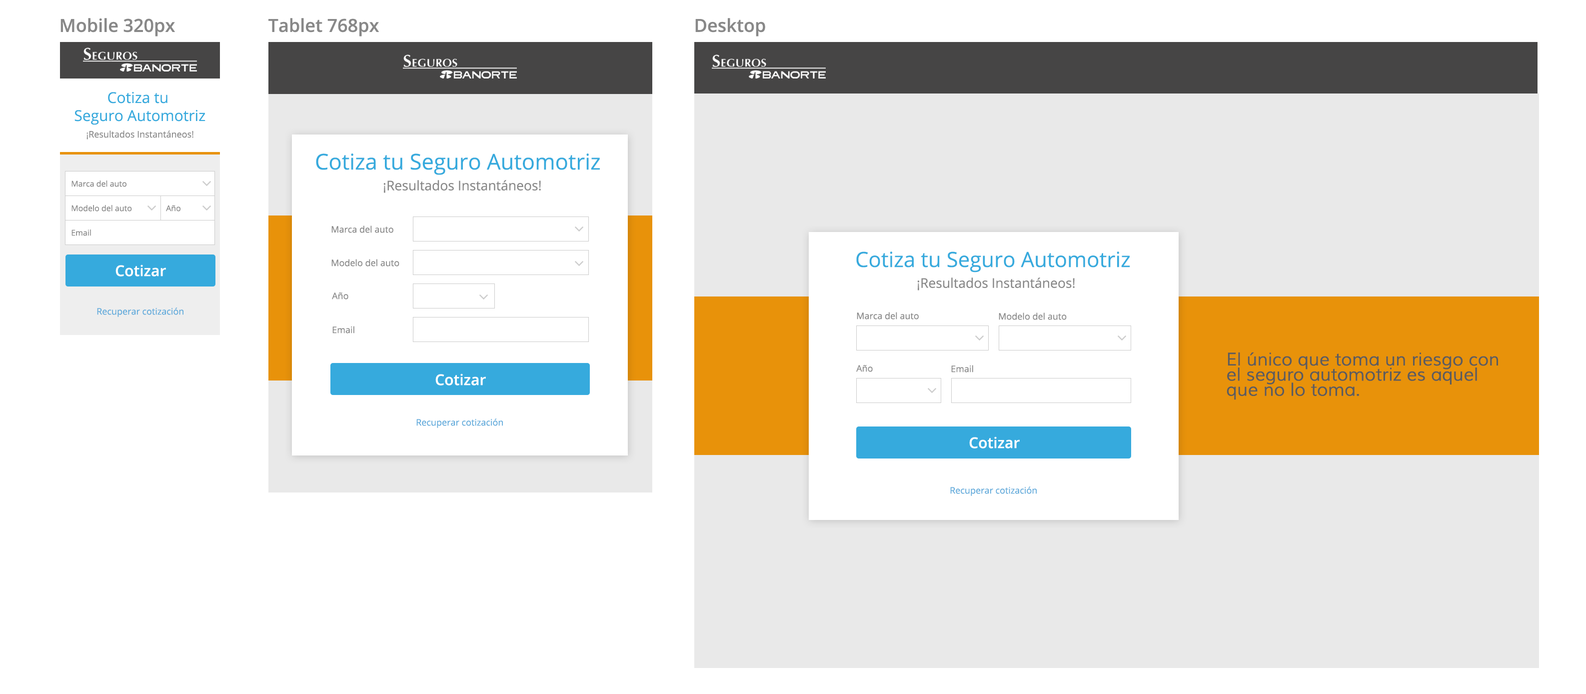
<style>
.page{position:relative;width:1586px;height:694px;background:#ffffff}
.page>*{position:absolute;margin:0}
.t1{font:18px "OpenSans-Semibold";color:#888888}
.t2{font:15px "OpenSans";color:#36aadd}
.t3{font:9px "OpenSans";color:#888888}
.t4{font:21.8px "OpenSans";color:#36aadd}
.t5{font:8px "OpenSans";color:#888888}
.t6{font:13.3px "OpenSans";color:#888888}
.t7{font:21px "OpenSans";color:#36aadd}
.t8{font:15px "OpenSans-Semibold";color:#ffffff}
.t9{font:9px "OpenSans";color:#5faadb}
.t10{font:18px/15.1px "Muli";color:#5c5c5c}
</style>
<div class="page">
<p class="t1" style="left:60px;top:18px;width:115px;height:18px">Mobile 320px</p>
<p class="t1" style="left:268px;top:18px;width:111px;height:18px">Tablet 768px</p>
<p class="t1" style="left:696px;top:18px;width:70px;height:18px">Desktop</p>
<p class="t2" style="left:74px;top:92px;width:132px;height:33px;text-align:center">Cotiza tu <br>Seguro Automotriz</p>
<p class="t3" style="left:86px;top:130px;width:108px;height:10px">¡Resultados Instantáneos!</p>
<p class="t4" style="left:316px;top:154px;width:284px;height:21px">Cotiza tu Seguro Automotriz</p>
<p class="t5" style="left:72px;top:180px;width:54px;height:7px">Marca del auto</p>
<p class="t6" style="left:384px;top:180px;width:157px;height:13px">¡Resultados Instantáneos!</p>
<p class="t5" style="left:72px;top:205px;width:60px;height:7px">Modelo del auto</p>
<p class="t5" style="left:166px;top:205px;width:14px;height:7px">Año</p>
<p class="t5" style="left:72px;top:230px;width:19px;height:6px">Email</p>
<p class="t3" style="left:332px;top:226px;width:62px;height:7px">Marca del auto</p>
<p class="t7" style="left:856px;top:252px;width:274px;height:20px">Cotiza tu Seguro Automotriz</p>
<p class="t8" style="left:116px;top:264px;width:50px;height:12px">Cotizar</p>
<p class="t3" style="left:332px;top:259px;width:68px;height:7px">Modelo del auto</p>
<p class="t6" style="left:918px;top:278px;width:157px;height:12px">¡Resultados Instantáneos!</p>
<p class="t3" style="left:332px;top:292px;width:16px;height:8px">Año</p>
<p class="t9" style="left:97px;top:308px;width:87px;height:9px">Recuperar cotización</p>
<p class="t3" style="left:857px;top:312px;width:62px;height:8px">Marca del auto</p>
<p class="t3" style="left:999px;top:312px;width:68px;height:8px">Modelo del auto</p>
<p class="t3" style="left:332px;top:326px;width:22px;height:8px">Email</p>
<p class="t10" style="left:1227px;top:352px;width:271px;height:48px">El único que toma un riesgo con <br>el seguro automotriz es aquel <br>que no lo toma.</p>
<p class="t3" style="left:856px;top:365px;width:17px;height:7px">Año</p>
<p class="t3" style="left:952px;top:365px;width:22px;height:7px">Email</p>
<p class="t8" style="left:436px;top:374px;width:50px;height:12px">Cotizar</p>
<p class="t9" style="left:416px;top:418px;width:87px;height:10px">Recuperar cotización</p>
<p class="t8" style="left:970px;top:436px;width:50px;height:12px">Cotizar</p>
<p class="t9" style="left:950px;top:486px;width:87px;height:10px">Recuperar cotización</p>
</div>
